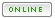
<style>
.page{position:relative;width:55px;height:18px;background:#ffffff}
.page>*{position:absolute;margin:0}
.t1{font:9px "Silkscreen";color:#339419}
</style>
<div class="page">
<p class="t1" style="left:9px;top:7px;width:33px;height:5px">online</p>
</div>
